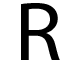
<style>
.page{position:relative;width:75px;height:75px;background:#ffffff}
.page>*{position:absolute;margin:0}
.t1{font:84.2px "MyriadPro-Regular";color:#000000;scale:1.05 1}
</style>
<div class="page">
<p class="t1" style="left:21px;top:3px;width:39px;height:57px">R</p>
</div>
